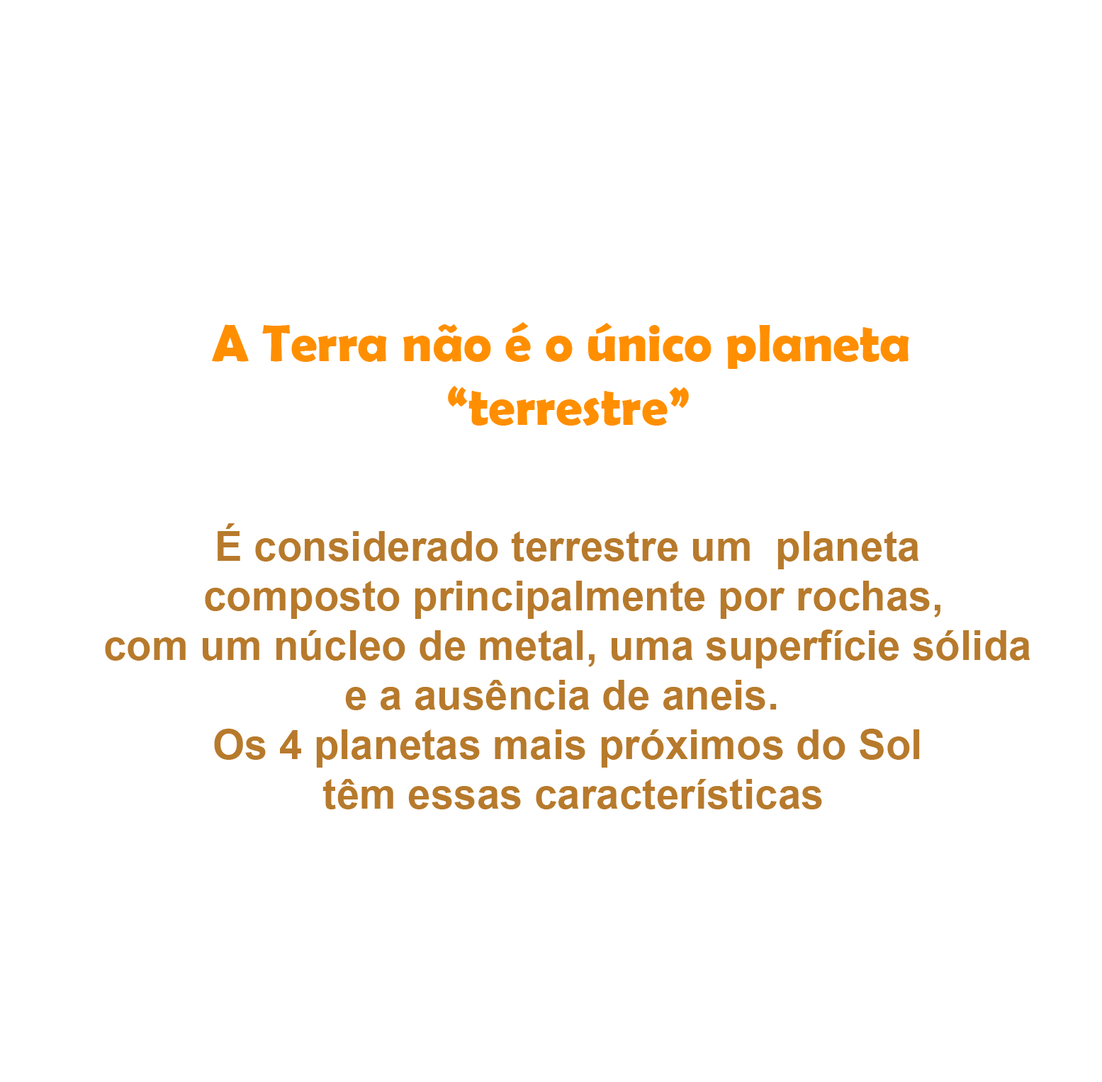
<style>
.page{position:relative;width:1102px;height:1082px;background:#ffffff}
.page>*{position:absolute;margin:0}
.t1{font:53.1px "BerlinSansFBDemi-Bold";color:#ff8f00}
.t2{font:41.3px "Arial-BoldMT";color:#b77a2c}
.t3{font:41.3px "BerlinSansFBDemi-Bold";color:#ff8f00}
</style>
<div class="page">
<p class="t1" style="left:212px;top:322px;width:697px;height:104px;text-align:center">A Terra não é o único planeta <br>“terrestre”</p>
<p class="t2" style="left:105px;top:524px;width:925px;height:286px"><span class="t3"><br><br></span>É considerado terrestre um  planeta<br> composto principalmente por rochas,<br> com um núcleo de metal, uma superfície sólida <br>e a ausência de aneis. <br>Os 4 planetas mais próximos do Sol<br> têm essas características</p>
</div>
